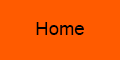
<style>
.page{position:relative;width:120px;height:60px;background:#ff5b00}
.page>*{position:absolute;margin:0}
.t1{font:20px "Gautami";color:#000000}
</style>
<div class="page">
<p class="t1" style="left:36px;top:22px;width:48px;height:13px">Home</p>
</div>
